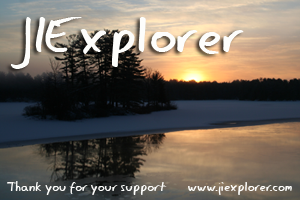
<style>
.page{position:relative;width:300px;height:200px}
.page>*{position:absolute;margin:0}
.t1{font:53.9px "EagerNaturalist";color:#fdfdfb}
.t2{font:13.5px "EagerNaturalist";color:#fdfdfb}
</style>
<div class="page">
<p class="t1" style="left:11px;top:17px;width:233px;height:52px">JIExplorer</p>
<p class="t2" style="left:7px;top:181px;width:160px;height:14px">Thank you for your support</p>
<p class="t2" style="left:188px;top:182px;width:104px;height:13px">www.jiexplorer.com</p>
</div>
